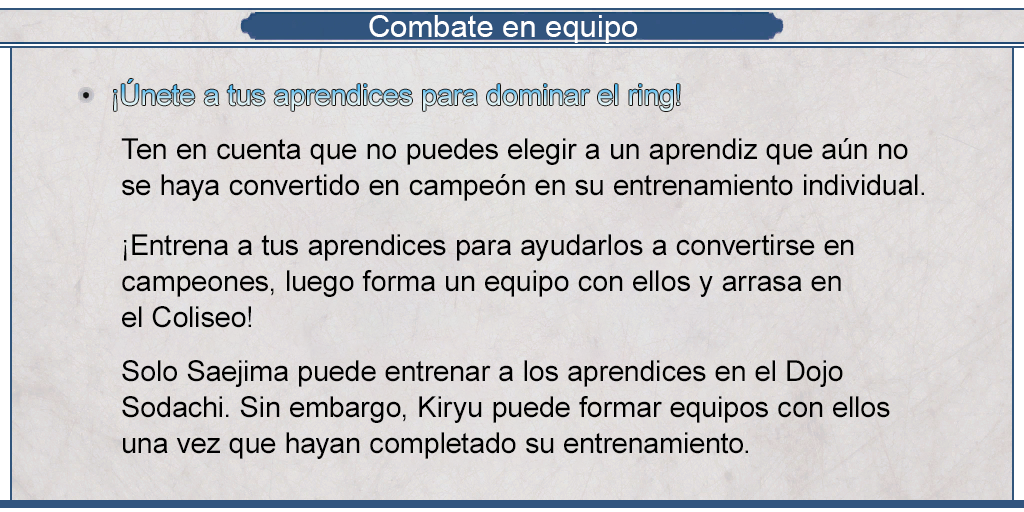
<style>
.page{position:relative;width:1024px;height:512px}
.page>*{position:absolute;margin:0}
.t1{font:30.8px "ArialMT";color:#ffffff}
.t2{font:29px/36px "ArialMT";color:#000000}
</style>
<div class="page">
<p class="t1" style="left:369px;top:15px;width:269px;height:28px">Combate en equipo</p>
<p class="t2" style="left:121px;top:138px;width:803px;height:63px">Ten en cuenta que no puedes elegir a un aprendiz que aún no <br>se haya convertido en campeón en su entrenamiento individual.</p>
<p class="t2" style="left:122px;top:234px;width:732px;height:94px">¡Entrena a tus aprendices para ayudarlos a convertirse en <br>campeones, luego forma un equipo con ellos y arrasa en <br>el Coliseo!</p>
<p class="t2" style="left:122px;top:360px;width:768px;height:99px">Solo Saejima puede entrenar a los aprendices en el Dojo <br>Sodachi. Sin embargo, Kiryu puede formar equipos con ellos <br>una vez que hayan completado su entrenamiento.</p>
</div>
